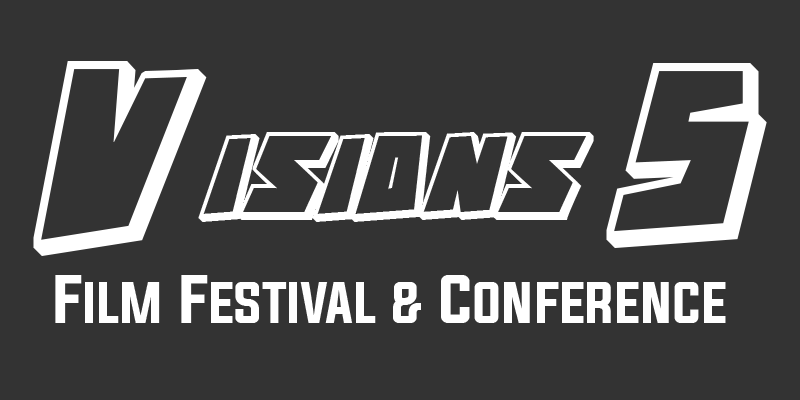
<style>
.page{position:relative;width:800px;height:400px;background:#333333}
.page>*{position:absolute;margin:0}
.t1{font:54.7px "ActionComics";color:#ffffff}
.t2{font:112.3px "ActionComics";color:#ffffff}
.t3{font:49.5px "Evogria";color:#ffffff}
.t4{font:59.4px "Evogria";color:#ffffff}
</style>
<div class="page">
<p class="t1" style="left:33px;top:61px;width:734px;height:195px"><span class="t2">V</span>ISIONS <span class="t2">5</span></p>
<p class="t3" style="left:55px;top:275px;width:671px;height:48px"><span class="t4">F</span>ILM<span class="t4"> F</span>ESTIVAL &amp;<span class="t4"> C</span>ONFERENCE</p>
</div>
